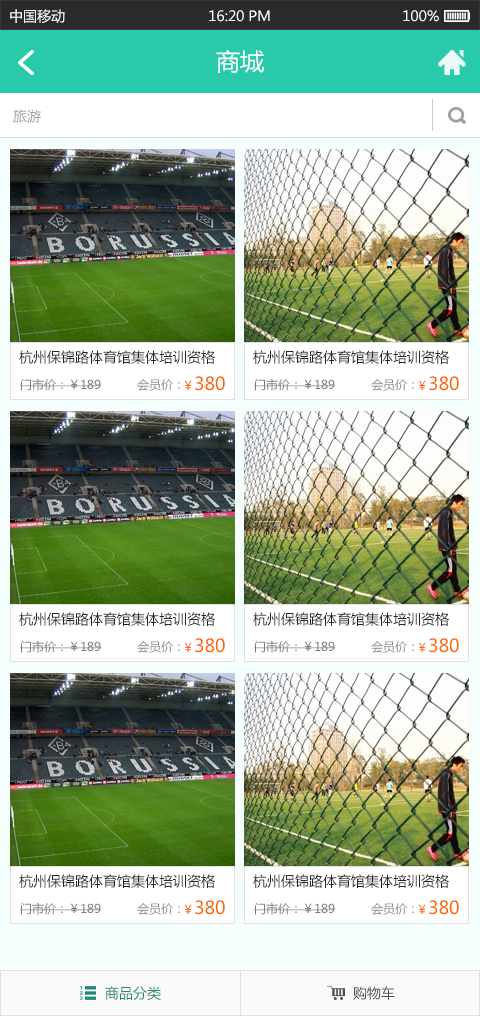
<style>
.page{position:relative;width:480px;height:1016px}
.page>*{position:absolute;margin:0}
.t1{font:14px "MicrosoftYaHei";color:#ffffff}
.t2{font:24px "MicrosoftYaHei";color:#f4fffd}
.t3{font:14px "MicrosoftYaHei";color:#a0a0a0}
.t4{font:14px "MicrosoftYaHei";color:#252525}
.t5{font:18px "MicrosoftYaHei";color:#fe6600}
.t6{font:12px "MicrosoftYaHei";color:#fe6600}
.t7{font:12px "MicrosoftYaHei";color:#7d7d7b}
.t8{font:12px "MicrosoftYaHei";color:#878787}
.t9{font:14px "MicrosoftYaHei";color:#1d8a74}
.t10{font:14px "MicrosoftYaHei";color:#4e4e4e}
</style>
<div class="page">
<p class="t1" style="left:10px;top:9px;width:55px;height:14px">中国移动</p>
<p class="t1" style="left:209px;top:10px;width:61px;height:12px">16:20 PM</p>
<p class="t1" style="left:403px;top:10px;width:36px;height:12px">100%</p>
<p class="t2" style="left:216px;top:49px;width:48px;height:24px">商城</p>
<p class="t3" style="left:13px;top:109px;width:28px;height:14px">旅游</p>
<p class="t4" style="left:19px;top:350px;width:196px;height:14px">杭州保锦路体育馆集体培训资格</p>
<p class="t4" style="left:253px;top:350px;width:196px;height:14px">杭州保锦路体育馆集体培训资格</p>
<p class="t5" style="left:184px;top:376px;width:41px;height:15px"><span class="t6">￥</span>380</p>
<p class="t5" style="left:418px;top:376px;width:41px;height:15px"><span class="t6">￥</span>380</p>
<p class="t7" style="left:20px;top:378px;width:82px;height:13px">门市价：￥189</p>
<p class="t8" style="left:137px;top:379px;width:43px;height:12px">会员价：</p>
<p class="t7" style="left:254px;top:378px;width:82px;height:13px">门市价：￥189</p>
<p class="t8" style="left:371px;top:379px;width:43px;height:12px">会员价：</p>
<p class="t4" style="left:19px;top:612px;width:196px;height:14px">杭州保锦路体育馆集体培训资格</p>
<p class="t4" style="left:253px;top:612px;width:196px;height:14px">杭州保锦路体育馆集体培训资格</p>
<p class="t7" style="left:20px;top:640px;width:82px;height:13px">门市价：￥189</p>
<p class="t8" style="left:137px;top:641px;width:43px;height:12px">会员价：</p>
<p class="t5" style="left:184px;top:638px;width:41px;height:15px"><span class="t6">￥</span>380</p>
<p class="t7" style="left:254px;top:640px;width:82px;height:13px">门市价：￥189</p>
<p class="t8" style="left:371px;top:641px;width:43px;height:12px">会员价：</p>
<p class="t5" style="left:418px;top:638px;width:41px;height:15px"><span class="t6">￥</span>380</p>
<p class="t4" style="left:19px;top:874px;width:196px;height:14px">杭州保锦路体育馆集体培训资格</p>
<p class="t4" style="left:253px;top:874px;width:196px;height:14px">杭州保锦路体育馆集体培训资格</p>
<p class="t7" style="left:20px;top:902px;width:82px;height:13px">门市价：￥189</p>
<p class="t8" style="left:137px;top:903px;width:43px;height:12px">会员价：</p>
<p class="t5" style="left:184px;top:900px;width:41px;height:15px"><span class="t6">￥</span>380</p>
<p class="t7" style="left:254px;top:902px;width:82px;height:13px">门市价：￥189</p>
<p class="t8" style="left:371px;top:903px;width:43px;height:12px">会员价：</p>
<p class="t5" style="left:418px;top:900px;width:41px;height:15px"><span class="t6">￥</span>380</p>
<p class="t9" style="left:105px;top:986px;width:56px;height:14px">商品分类</p>
<p class="t10" style="left:353px;top:986px;width:42px;height:14px">购物车</p>
</div>
